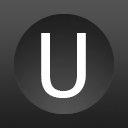
<style>
.page{position:relative;width:128px;height:128px}
.page>*{position:absolute;margin:0}
.t1{font:100px "Consolas";color:#ffffff}
</style>
<div class="page">
<p class="t1" style="left:41px;top:33px;width:45px;height:65px">U</p>
</div>
